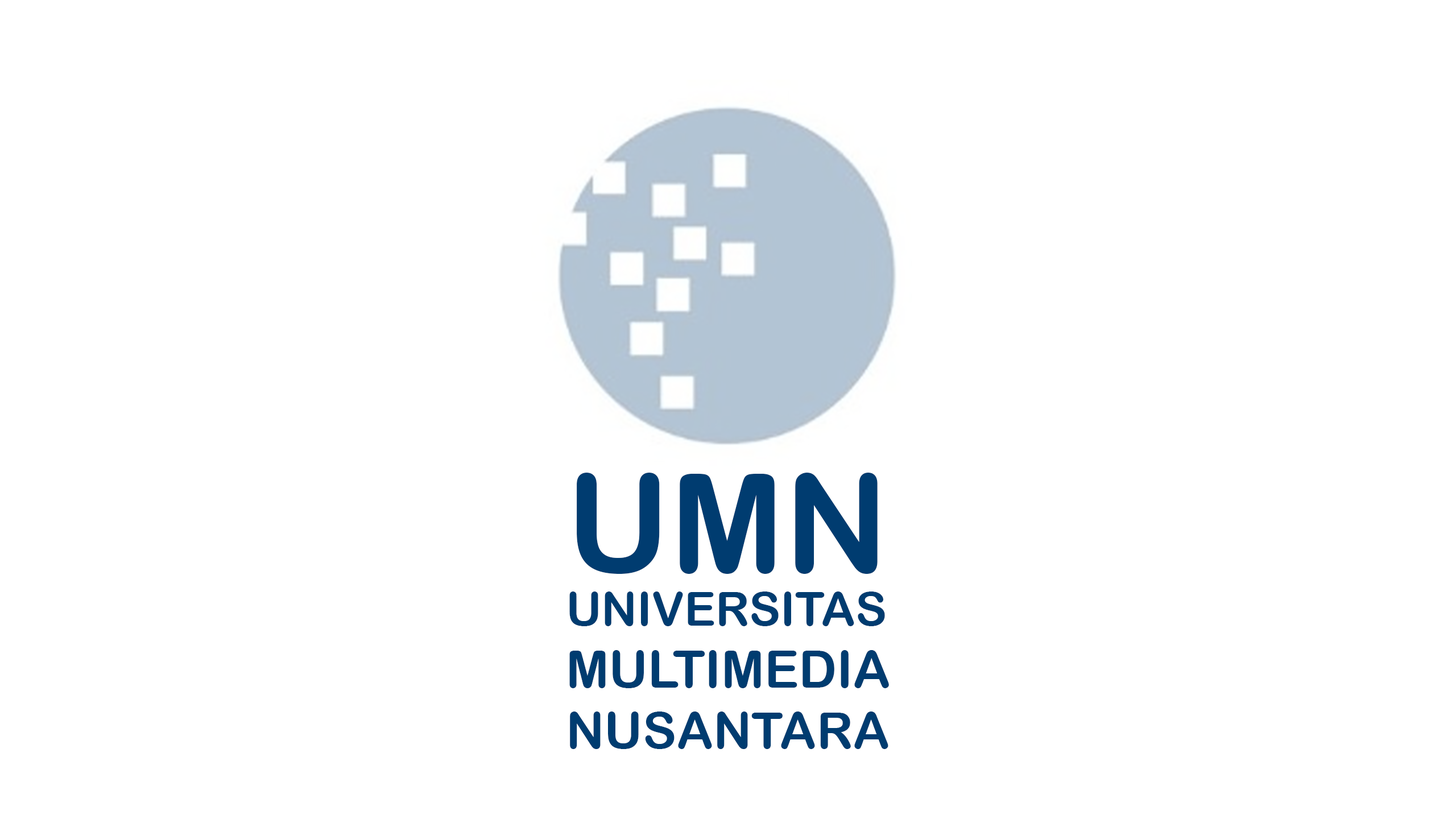
<style>
.page{position:relative;width:1456px;height:819px;background:#ffffff}
.page>*{position:absolute;margin:0}
.t1{font:137.1px "ArialRoundedMTBold";color:#003c70}
.t2{font:46.9px "ArialRoundedMTBold";color:#003c70}
.t3{font:51.6px "ArialRoundedMTBold";color:#003c70}
.t4{font:50.7px "ArialRoundedMTBold";color:#003c70}
</style>
<div class="page">
<p class="t1" style="left:577px;top:473px;width:301px;height:101px">UMN</p>
<p class="t2" style="left:569px;top:591px;width:320px;height:158px">UNIVERSITAS<br><span class="t3">MULTIMEDIA<br></span><span class="t4">NUSANTARA</span></p>
</div>
